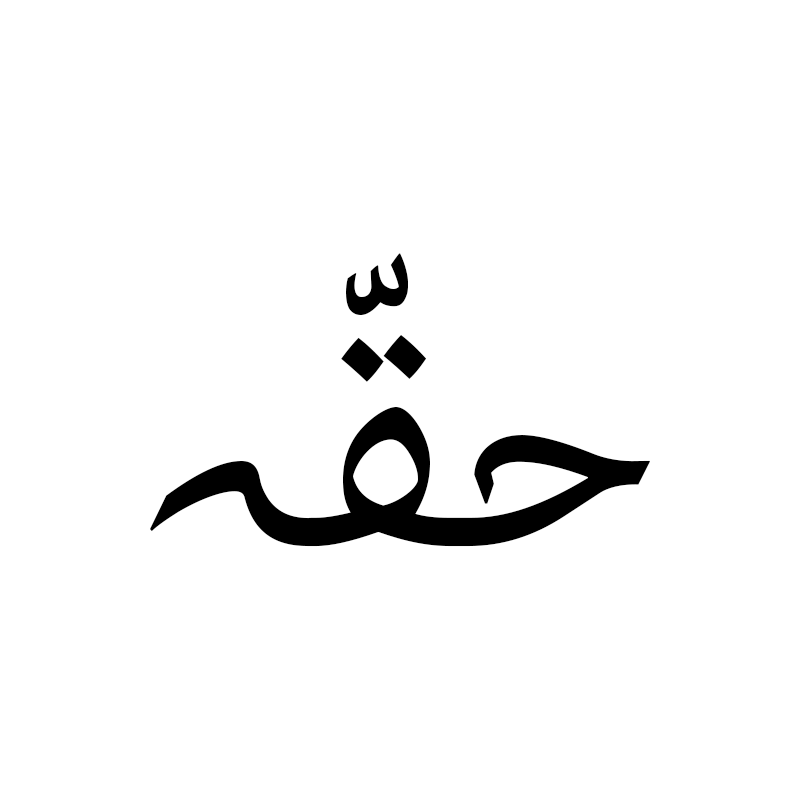
<style>
.page{position:relative;width:800px;height:800px;background:#ffffff}
.page>*{position:absolute;margin:0}
.t1{font:450px "AdobeArabic-Regular";color:#000000}
</style>
<div class="page">
<p class="t1" style="left:150px;top:253px;width:500px;height:294px">حقّہ</p>
</div>
